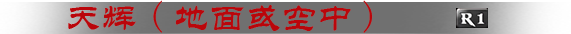
<style>
.page{position:relative;width:571px;height:34px;background:#707070}
.page>*{position:absolute;margin:0}
.t1{font:36px "STLiti";color:#ba060b}
.t2{font:36px "FangSong";color:#ba060b}
</style>
<div class="page">
<p class="t1" style="left:68px;top:0px;width:305px;height:33px">天辉<span class="t2">(</span>地面或空中<span class="t2">)</span></p>
</div>
